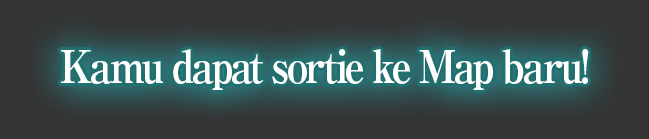
<style>
.page{position:relative;width:649px;height:139px;background:#333333}
.page>*{position:absolute;margin:0}
.t1{font:45px "RyuminPro-ExBold";letter-spacing:-0.08em;color:#ffffff;scale:0.9 1}
</style>
<div class="page">
<p class="t1" style="left:61px;top:49px;width:528px;height:41px">Kamu dapat sortie ke Map baru!</p>
</div>
